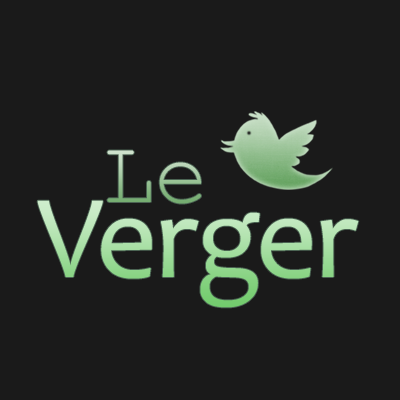
<style>
.page{position:relative;width:400px;height:400px;background:#1a1a1a}
.page>*{position:absolute;margin:0}
.t1{font:90px "CourierNewPSMT"}
.t2{font:120px "Candara"}
</style>
<div class="page">
<p class="t1" style="left:107px;top:150px;width:94px;height:54px">Le</p>
<p class="t2" style="left:37px;top:200px;width:322px;height:108px">Verger</p>
</div>
